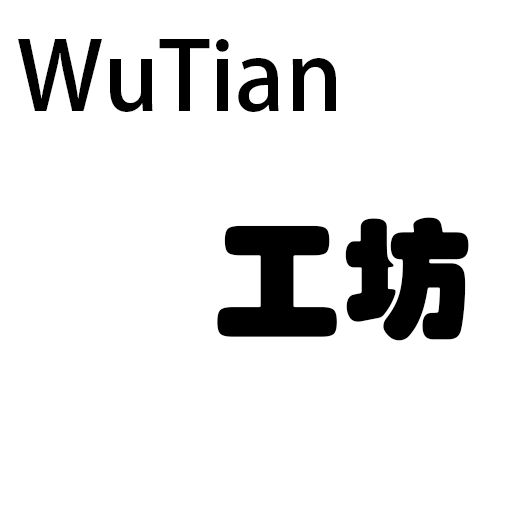
<style>
.page{position:relative;width:512px;height:512px;background:#ffffff}
.page>*{position:absolute;margin:0}
.t1{font:94.2px "AdobeHeitiStd-Regular";color:#000000}
.t2{font:130px "STHupo";color:#000000}
</style>
<div class="page">
<p class="t1" style="left:18px;top:39px;width:318px;height:73px">WuTian</p>
<p class="t2" style="left:217px;top:217px;width:252px;height:124px">工坊</p>
</div>
